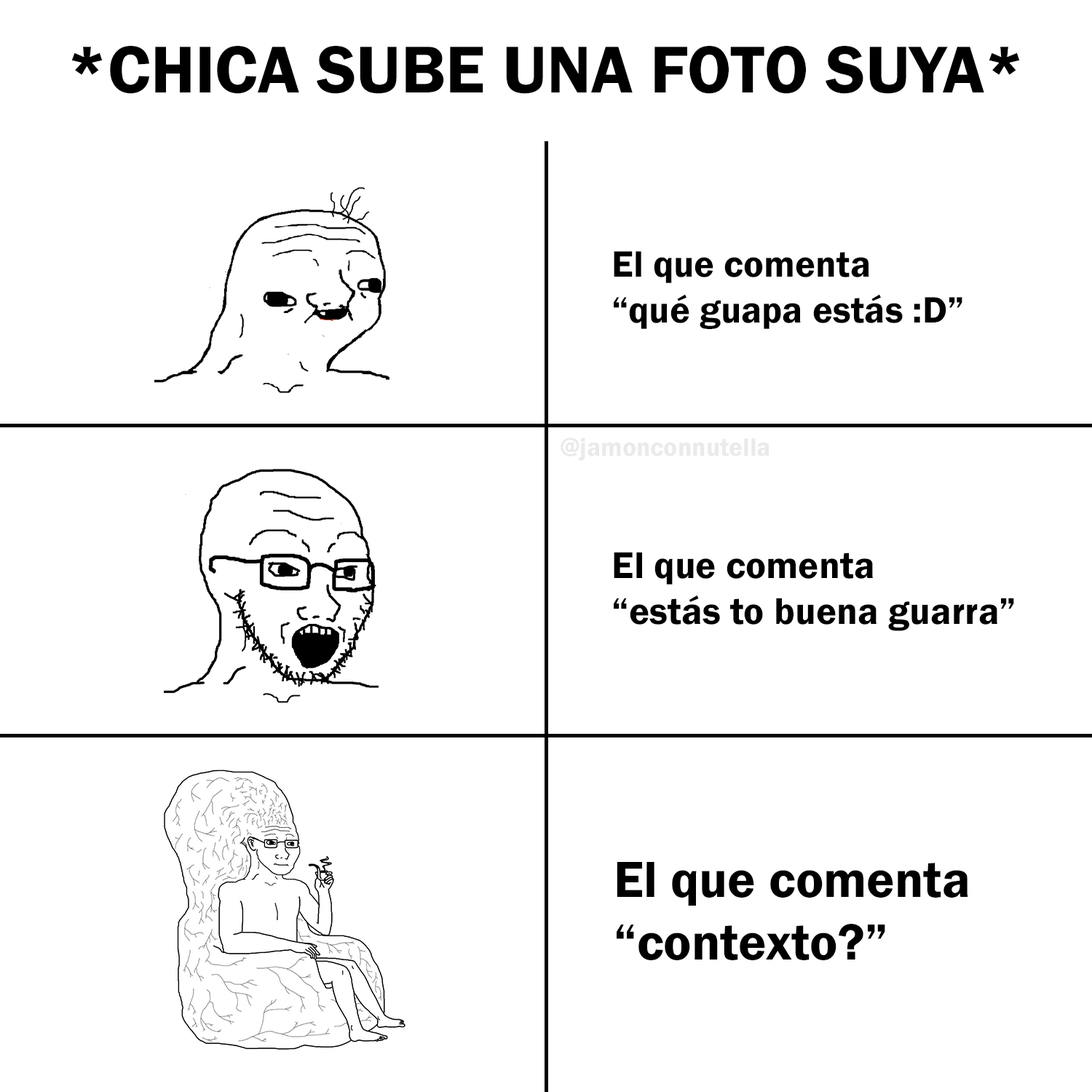
<style>
.page{position:relative;width:1092px;height:1092px;background:#ffffff}
.page>*{position:absolute;margin:0}
.t1{font:68.7px "FranklinGothic-Demi";color:#000000}
.t2{font:38.1px "FranklinGothic-Demi";color:#000000}
.t3{font:26px "FranklinGothic-Demi";color:#eaeaea}
.t4{font:38.6px "FranklinGothic-Demi";color:#000000}
.t5{font:52.4px "FranklinGothic-Demi";color:#000000}
</style>
<div class="page">
<p class="t1" style="left:71px;top:46px;width:949px;height:48px">*CHICA SUBE UNA FOTO SUYA*</p>
<p class="t2" style="left:614px;top:251px;width:348px;height:78px">El que comenta<br>“qué guapa estás :D”</p>
<p class="t3" style="left:561px;top:438px;width:208px;height:23px">@jamonconnutella</p>
<p class="t4" style="left:614px;top:552px;width:400px;height:79px">El que comenta<br>“estás to buena guarra”</p>
<p class="t5" style="left:617px;top:862px;width:351px;height:98px">El que comenta<br>“contexto?”</p>
</div>
